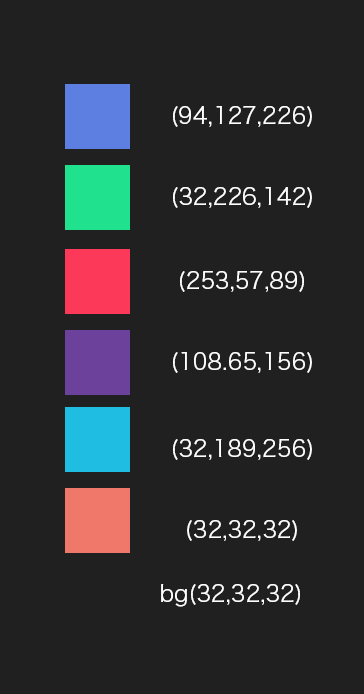
<style>
.page{position:relative;width:364px;height:694px;background:#202020}
.page>*{position:absolute;margin:0}
.t1{font:22.3px "HiraKakuPro-W3";color:#ffffff}
</style>
<div class="page">
<p class="t1" style="left:173px;top:106px;width:139px;height:21px">(94,127,226)</p>
<p class="t1" style="left:173px;top:187px;width:139px;height:21px">(32,226,142)</p>
<p class="t1" style="left:180px;top:271px;width:124px;height:21px">(253,57,89)</p>
<p class="t1" style="left:173px;top:352px;width:139px;height:21px">(108.65,156)</p>
<p class="t1" style="left:173px;top:439px;width:139px;height:21px">(32,189,256)</p>
<p class="t1" style="left:187px;top:520px;width:110px;height:21px">(32,32,32)</p>
<p class="t1" style="left:161px;top:584px;width:139px;height:23px">bg(32,32,32)</p>
</div>
